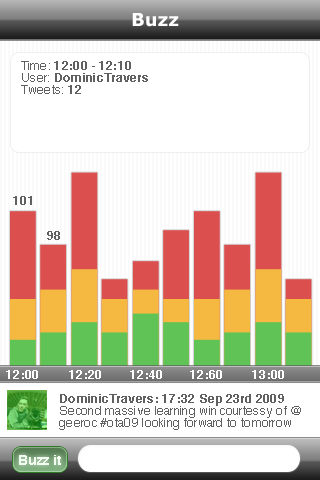
<style>
.page{position:relative;width:320px;height:480px;background:#ffffff}
.page>*{position:absolute;margin:0}
.t1{font:18px "Verdana-Bold";color:#ffffff}
.t2{font:12px/12px "Helvetica-Bold";letter-spacing:0.025em;color:#606060}
.t3{font:12px/12px "Helvetica";letter-spacing:0.025em;color:#606060}
.t4{font:12px "Helvetica-Bold";letter-spacing:0.025em;color:#606060}
.t5{font:12px "Helvetica-Bold";letter-spacing:0.025em;color:#ffffff}
.t6{font:14px "Helvetica-Bold";color:#f0fdef}
</style>
<div class="page">
<p class="t1" style="left:132px;top:13px;width:47px;height:14px">Buzz</p>
<p class="t2" style="left:21px;top:61px;width:127px;height:33px"><span class="t3">Time: </span>12:00 - 12:10<br><span class="t3">User: </span>DominicTravers<br><span class="t3">Tweets: </span>12</p>
<p class="t4" style="left:13px;top:196px;width:19px;height:9px">101</p>
<p class="t4" style="left:47px;top:231px;width:13px;height:9px">98</p>
<p class="t5" style="left:6px;top:370px;width:32px;height:9px">12:00</p>
<p class="t5" style="left:69px;top:370px;width:32px;height:9px">12:20</p>
<p class="t5" style="left:130px;top:370px;width:32px;height:9px">12:40</p>
<p class="t5" style="left:190px;top:370px;width:32px;height:9px">12:60</p>
<p class="t5" style="left:252px;top:370px;width:32px;height:9px">13:00</p>
<p class="t3" style="left:59px;top:394px;width:242px;height:36px"><span class="t2">DominicTravers: 17:32 Sep 23rd 2009<br></span>Second massive learning win courtessy of @<br>geeroc #ota09 looking forward to tomorrow</p>
<p class="t6" style="left:19px;top:455px;width:42px;height:10px">Buzz it</p>
</div>
